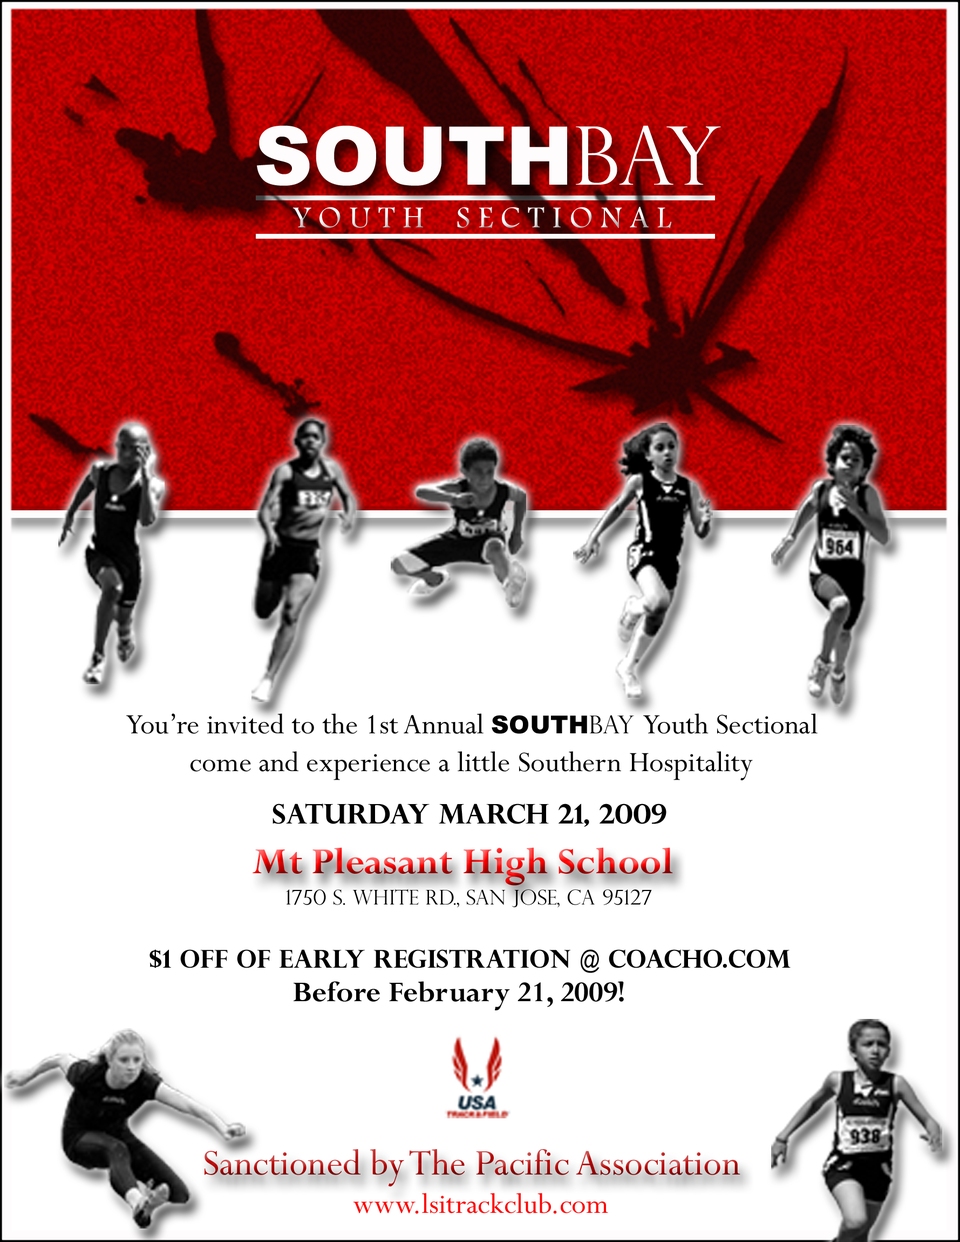
<style>
.page{position:relative;width:960px;height:1242px;background:#ffffff}
.page>*{position:absolute;margin:0}
.t1{font:81px "Arial-Black";color:#fefcfc}
.t2{font:81px "PerpetuaTitlingMT-Light";color:#fefcfc}
.t3{font:31.5px "FootlightMTLight";color:#fdfcfc}
.t4{font:31.5px "Perpetua";color:#000000}
.t5{font:24.7px "Arial-Black";color:#000000}
.t6{font:24.7px "PerpetuaTitlingMT-Light";color:#000000}
.t7{font:27px "PerpetuaTitlingMT-Bold";color:#000000}
.t8{font:40.5px "Perpetua-Bold"}
.t9{font:20.2px "PerpetuaTitlingMT-Light";color:#000000}
.t10{font:24.7px "PerpetuaTitlingMT-Bold";color:#000000}
.t11{font:31.5px "Perpetua-Bold";color:#000000}
.t12{font:40.5px "Perpetua"}
.t13{font:31.5px "Perpetua";color:#ff0000}
</style>
<div class="page">
<p class="t1" style="left:257px;top:125px;width:464px;height:61px">SOUTH<span class="t2">BAY</span></p>
<p class="t3" style="left:293px;top:207px;width:379px;height:21px">Y O U T H    S E C T I O N A L</p>
<p class="t4" style="left:126px;top:713px;width:692px;height:67px">You’re invited to the 1st Annual <span class="t5">SOUTH</span><span class="t6">BAY </span>Youth Sectional<br>         come and experience a little Southern Hospitality</p>
<p class="t7" style="left:273px;top:803px;width:394px;height:23px">saturday March 21, 2009</p>
<p class="t8" style="left:253px;top:847px;width:420px;height:38px">Mt Pleasant High School</p>
<p class="t9" style="left:286px;top:889px;width:366px;height:18px">1750 S. White Rd., San Jose, CA 95127</p>
<p class="t10" style="left:150px;top:949px;width:641px;height:24px">$1 off of early registration @ coacho.com</p>
<p class="t11" style="left:294px;top:981px;width:330px;height:29px">Before February 21, 2009!</p>
<p class="t12" style="left:205px;top:1149px;width:536px;height:37px">Sanctioned by The Pacific Association</p>
<p class="t13" style="left:353px;top:1193px;width:255px;height:21px">www.lsitrackclub.com</p>
</div>
